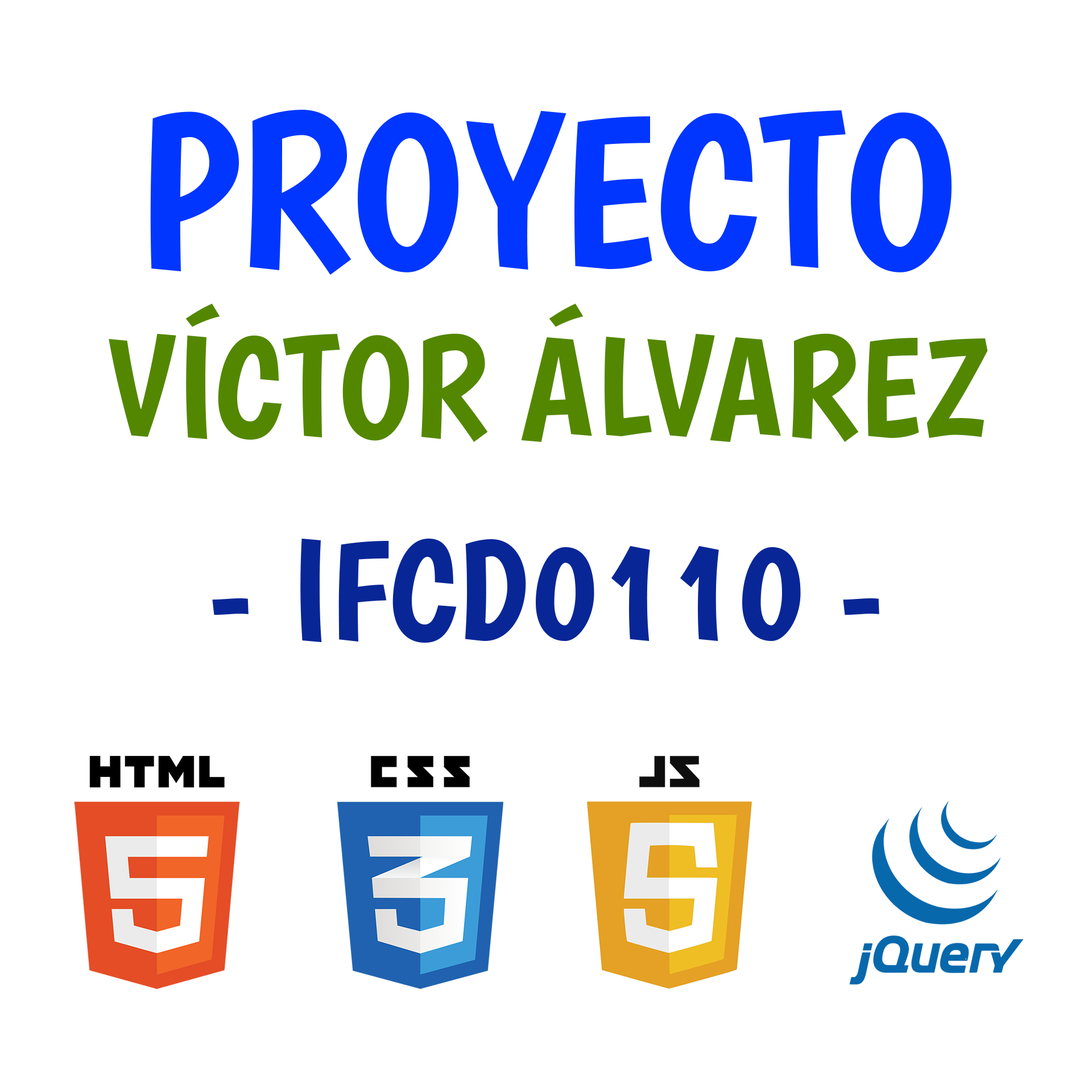
<style>
.page{position:relative;width:1092px;height:1092px;background:#ffffff}
.page>*{position:absolute;margin:0}
.t1{font:142.2px "Boogaloo-Regular";color:#538700}
.t2{font:216.1px "Boogaloo-Regular";color:#0036ff}
.t3{font:142.2px "Boogaloo-Regular";color:#082696}
</style>
<div class="page">
<p class="t1" style="left:109px;top:110px;width:879px;height:533px;text-align:center"><span class="t2">PROYECTO<br></span>VÍCTOR ÁLVAREZ<br><br><span class="t3">- IFCD0110 -</span></p>
</div>
